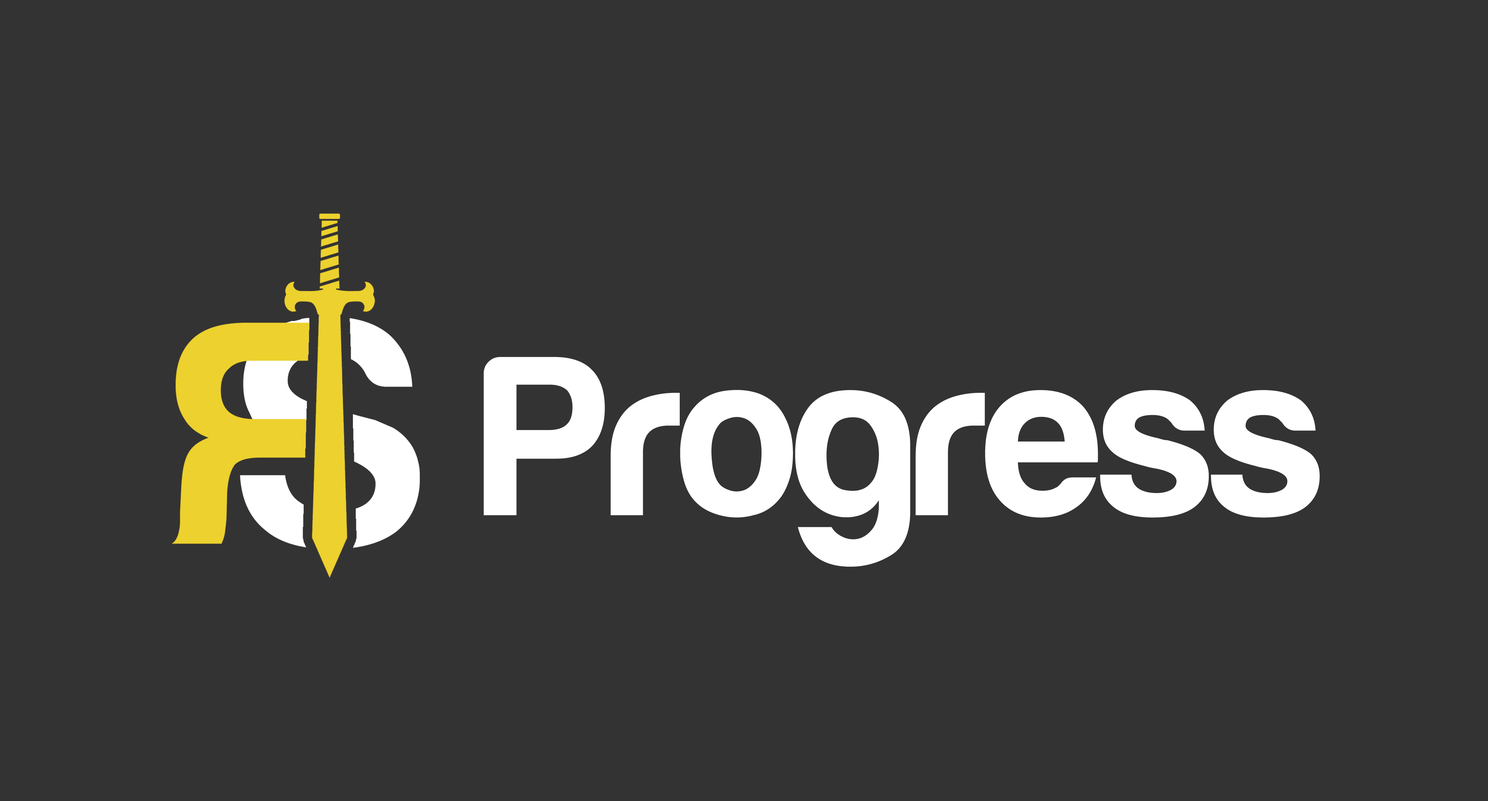
<style>
.page{position:relative;width:1488px;height:801px;background:#333333}
.page>*{position:absolute;margin:0}
.t1{font:235.4px "Harabara";color:#ffffff}
</style>
<div class="page">
<p class="t1" style="left:484px;top:357px;width:836px;height:210px">Progress</p>
</div>
